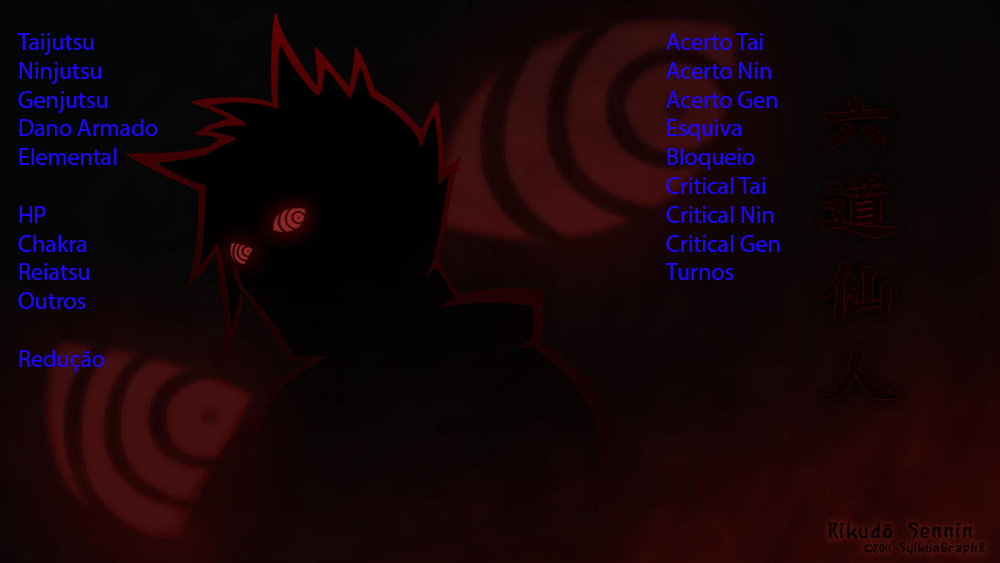
<style>
.page{position:relative;width:1000px;height:563px}
.page>*{position:absolute;margin:0}
.t1{font:24px "MyriadPro-Regular";color:#1d07f7}
.t2{font:30px "MyriadPro-Regular";color:#1d07f7}
</style>
<div class="page">
<p class="t1" style="left:17px;top:33px;width:763px;height:339px"><span class="t2"><br></span>Taijutsu                Acerto Tai<br>Ninjutsu                Acerto Nin<br>Genjutsu                Acerto Gen<br>Dano Armado               Esquiva<br>Elemental                Bloqueio<br>                  Critical Tai<br>HP                   Critical Nin<br>Chakra                 Critical Gen<br>Reiatsu                Turnos<br>Outros                 <br><br>Redução</p>
</div>
